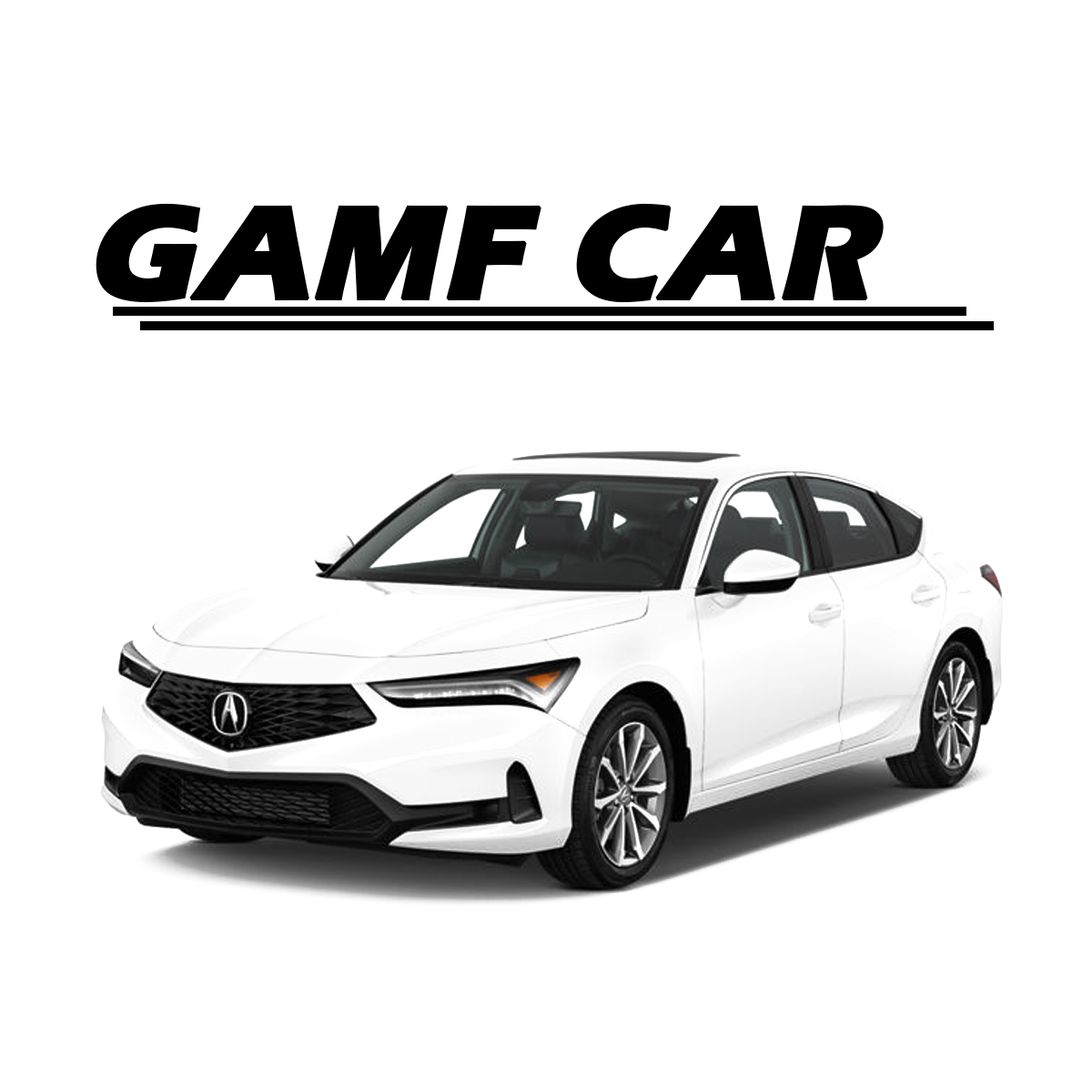
<style>
.page{position:relative;width:1092px;height:1092px;background:#ffffff}
.page>*{position:absolute;margin:0}
.t1{font:136.5px "ErasITC-Bold";color:#000000;text-transform:uppercase;font-weight:bold;font-style:italic}
</style>
<div class="page">
<p class="t1" style="left:96px;top:203px;width:788px;height:100px">Gamf Car</p>
</div>
